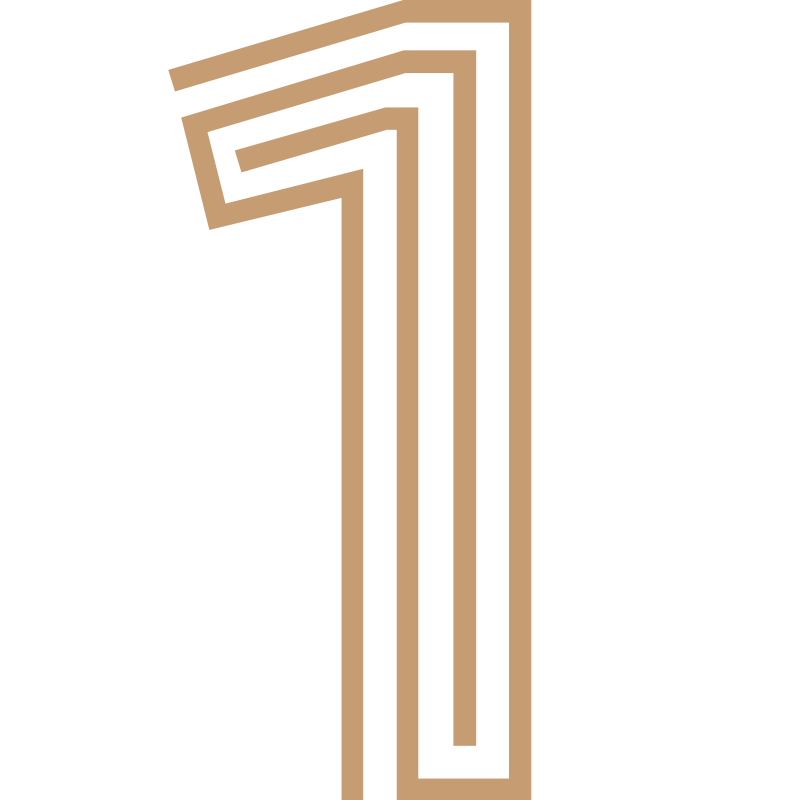
<style>
.page{position:relative;width:800px;height:800px;background:#ffffff}
.page>*{position:absolute;margin:0}
.t1{font:801px "LABYRINTHUS-REGULAR";color:#c69c72}
</style>
<div class="page">
<p class="t1" style="left:168px;top:0px;width:364px;height:801px">1</p>
</div>
